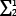
<style>
.page{position:relative;width:16px;height:16px;background:#ffffff}
.page>*{position:absolute;margin:0}
.t1{font:23.8px "CambriaMath";color:#000000}
.t2{font:9.6px "CambriaMath";color:#000000}
</style>
<div class="page">
<p class="t1" style="left:0px;top:0px;width:12px;height:16px">Σ</p>
<p class="t2" style="left:12px;top:0px;width:5px;height:6px">1</p>
<p class="t2" style="left:12px;top:9px;width:5px;height:7px">2</p>
</div>
